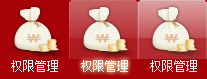
<style>
.page{position:relative;width:207px;height:79px;background:#a60308}
.page>*{position:absolute;margin:0}
.t1{font:12px "NSimSun";color:#fdfafa}
</style>
<div class="page">
<p class="t1" style="left:11px;top:60px;width:47px;height:12px">权限管理</p>
<p class="t1" style="left:81px;top:60px;width:47px;height:12px">权限管理</p>
<p class="t1" style="left:150px;top:60px;width:47px;height:12px">权限管理</p>
</div>
